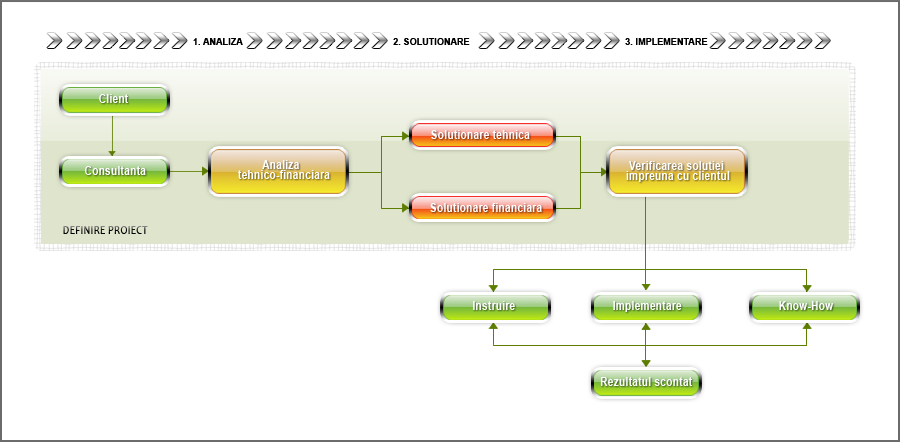
<style>
.page{position:relative;width:900px;height:442px;background:#ffffff}
.page>*{position:absolute;margin:0}
.t1{font:10px "Arial-BoldMT";letter-spacing:0.02em;color:#000000;scale:0.88 1}
.t2{font:11.7px "Arial-BoldMT";letter-spacing:0.02em;color:#ffffff;scale:0.88 1}
.t3{font:11.7px/10px "Arial-BoldMT";letter-spacing:0.02em;color:#ffffff;scale:0.88 1}
.t4{font:11.7px "Candara";letter-spacing:0.02em;scale:0.88 1}
</style>
<div class="page">
<p class="t1" style="left:193px;top:38px;width:50px;height:7px">1. ANALIZA</p>
<p class="t1" style="left:393px;top:38px;width:77px;height:7px">2. SOLUTIONARE</p>
<p class="t1" style="left:625px;top:38px;width:83px;height:7px">3. IMPLEMENTARE</p>
<p class="t2" style="left:99px;top:94px;width:29px;height:9px">Client</p>
<p class="t2" style="left:431px;top:130px;width:99px;height:9px">Solutionare tehnica</p>
<p class="t3" style="left:238px;top:160px;width:92px;height:19px">Analiza <br>tehnico-financiara</p>
<p class="t3" style="left:626px;top:161px;width:104px;height:21px">Verificarea solutiei<br>impreuna cu clientul</p>
<p class="t2" style="left:84px;top:166px;width:62px;height:9px">Consultanta</p>
<p class="t2" style="left:430px;top:203px;width:112px;height:9px">Solutionare financiara</p>
<p class="t4" style="left:63px;top:226px;width:85px;height:8px">DEFINIRE PROIECT</p>
<p class="t2" style="left:473px;top:301px;width:42px;height:9px">Instruire</p>
<p class="t2" style="left:613px;top:301px;width:69px;height:11px">Implementare</p>
<p class="t2" style="left:779px;top:301px;width:54px;height:9px">Know-How</p>
<p class="t2" style="left:600px;top:377px;width:92px;height:9px">Rezultatul scontat</p>
</div>
